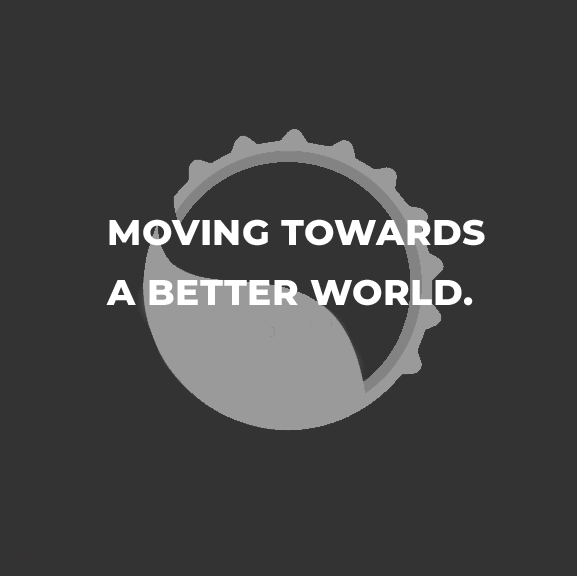
<style>
.page{position:relative;width:577px;height:576px;background:#333333}
.page>*{position:absolute;margin:0}
.t1{font:36px/30px "Montserrat-ExtraBold";letter-spacing:0.015em;color:#ffffff}
</style>
<div class="page">
<p class="t1" style="left:106px;top:219px;width:379px;height:87px">MOVING TOWARDS <br><br>A BETTER WORLD.</p>
</div>
